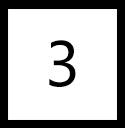
<style>
.page{position:relative;width:125px;height:128px;background:#ffffff}
.page>*{position:absolute;margin:0}
.t1{font:60px "MicrosoftYaHei";color:#000000}
</style>
<div class="page">
<p class="t1" style="left:49px;top:40px;width:27px;height:47px">3</p>
</div>
